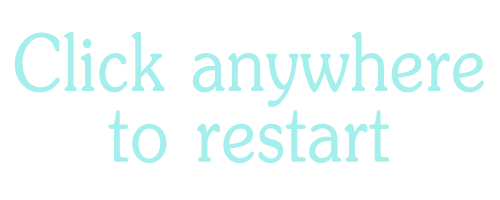
<style>
.page{position:relative;width:500px;height:200px;background:#ffffff}
.page>*{position:absolute;margin:0}
.t1{font:124.8px/70.7px "JasmineUPC";letter-spacing:-0.01em;color:#a4efeb;font-weight:bold;scale:0.87 1}
.t2{font:124.8px/70.7px "JasmineUPC";letter-spacing:-0.01em;color:#000000;font-weight:bold;scale:0.87 1}
</style>
<div class="page">
<p class="t1" style="left:14px;top:31px;width:470px;height:132px;text-align:center"><span class="t2"> </span>Click anywhere <br>to restart</p>
</div>
